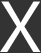
<style>
.page{position:relative;width:41px;height:53px;background:#333333}
.page>*{position:absolute;margin:0}
.t1{font:72px "SegoeUI";color:#ffffff}
</style>
<div class="page">
<p class="t1" style="left:0px;top:1px;width:41px;height:51px">X</p>
</div>
